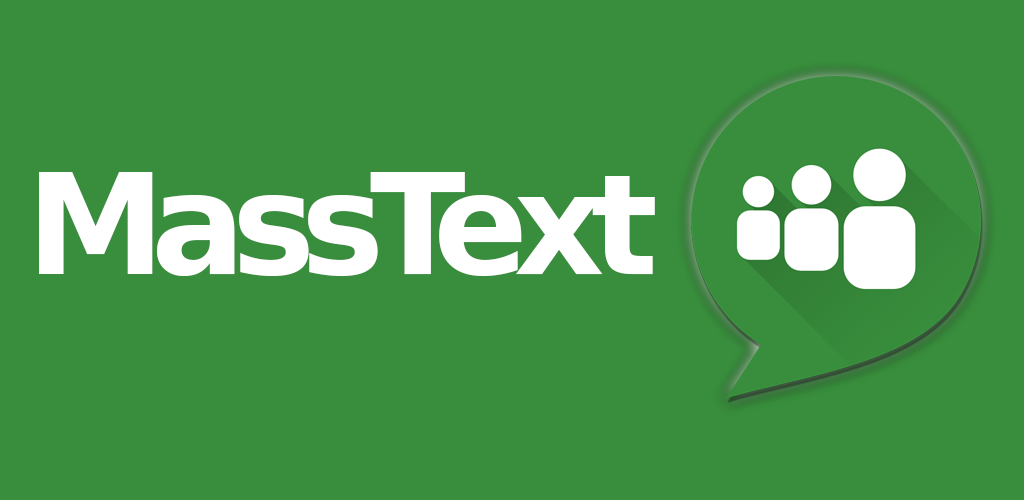
<style>
.page{position:relative;width:1024px;height:500px;background:#388e3c}
.page>*{position:absolute;margin:0}
.t1{font:140px "DejaVuSans-Bold";letter-spacing:-0.1em;color:#ffffff}
</style>
<div class="page">
<p class="t1" style="left:39px;top:172px;width:616px;height:104px">MassText</p>
</div>
